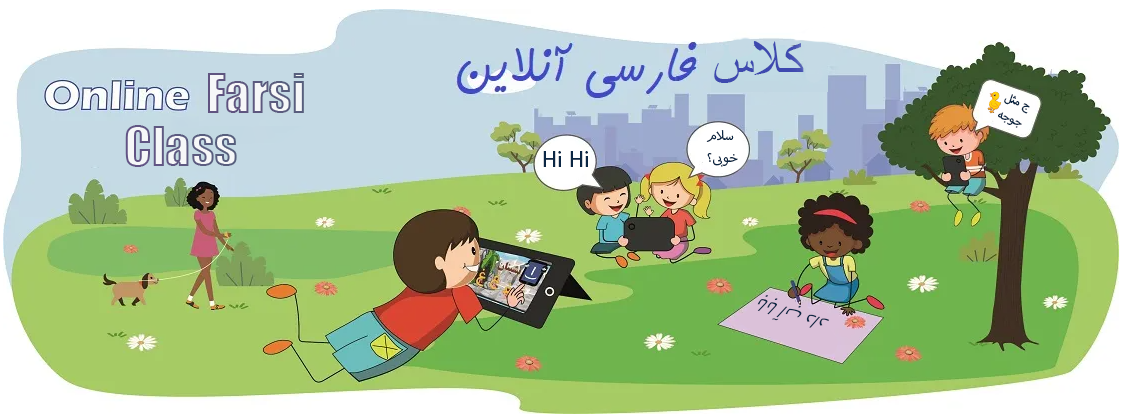
<style>
.page{position:relative;width:1126px;height:417px}
.page>*{position:absolute;margin:0}
.t1{font:49.6px "SimplifiedArabic";color:#3e49af}
.t2{font:50px "Impact"}
.t3{font:15.7px "MyriadArabic-Regular";color:#0b2744}
.t4{font:18.6px "MyriadArabic-Regular";color:#0b2744}
.t5{font:32.1px "MyriadArabic-Regular";color:#0b2744}
.t6{font:28.3px "MyriadArabic-Regular";color:#0b2744;scale:0.9 1}
</style>
<div class="page">
<p class="t1" style="left:714px;top:41px;width:90px;height:42px">کلاس</p>
<p class="t2" style="left:208px;top:73px;width:96px;height:40px">Farsi</p>
<p class="t3" style="left:998px;top:94px;width:32px;height:34px;rotate:21deg">ج مثل<br>جوجه</p>
<p class="t2" style="left:125px;top:125px;width:112px;height:42px">Class</p>
<p class="t4" style="left:706px;top:130px;width:32px;height:37px">سلام<br>خوبی؟</p>
<p class="t5" style="left:543px;top:151px;width:45px;height:16px">Hi Hi</p>
<p class="t6" style="left:757px;top:295px;width:73px;height:33px;rotate:-163deg">بابا آب داد</p>
</div>
